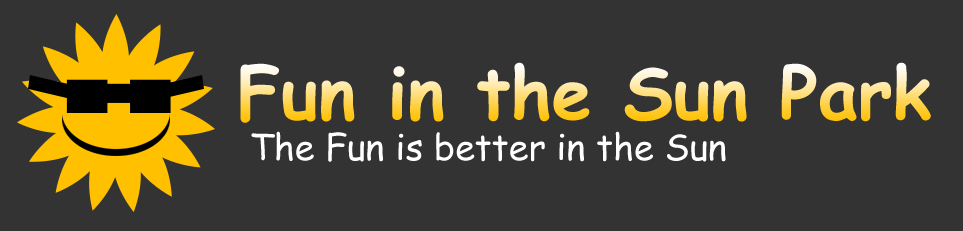
<style>
.page{position:relative;width:963px;height:231px;background:#333333}
.page>*{position:absolute;margin:0}
.t1{font:72px "ComicSansMS-Bold"}
.t2{font:36px "ComicSansMS";color:#ffffff}
</style>
<div class="page">
<p class="t1" style="left:240px;top:62px;width:691px;height:61px">Fun in the Sun Park</p>
<p class="t2" style="left:251px;top:131px;width:475px;height:31px">The Fun is better in the Sun</p>
</div>
